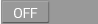
<style>
.page{position:relative;width:98px;height:24px;background:#999999}
.page>*{position:absolute;margin:0}
.t1{font:14px "Roboto-Regular";letter-spacing:-0.025em;color:#ffffff}
</style>
<div class="page">
<p class="t1" style="left:14px;top:8px;width:24px;height:10px">OFF</p>
</div>
